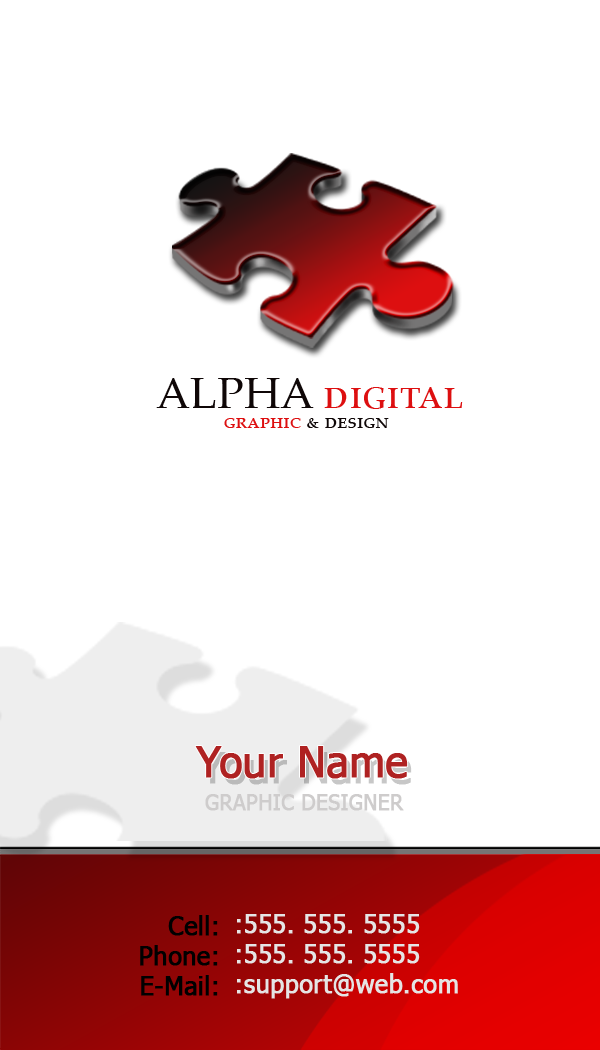
<style>
.page{position:relative;width:600px;height:1050px;background:#ffffff}
.page>*{position:absolute;margin:0}
.t1{font:44.2px "PalatinoLinotype-Roman";color:#dd0f10;font-variant:small-caps}
.t2{font:44.2px "PalatinoLinotype-Roman";color:#0f0707;font-variant:small-caps}
.t3{font:22.1px "PalatinoLinotype-Roman";color:#0f0707;font-variant:small-caps}
.t4{font:22.1px "PalatinoLinotype-Roman";color:#dd0f10;font-variant:small-caps}
.t5{font:41.7px "Tahoma";color:#af2222;font-weight:bold}
.t6{font:20.8px "Tahoma";color:#cecccc;font-weight:bold}
.t7{font:25px "Tahoma";color:#000000;font-weight:bold}
.t8{font:25px "Tahoma";color:#e5e5e5;font-weight:bold}
</style>
<div class="page">
<p class="t1" style="left:156px;top:378px;width:307px;height:31px"><span class="t2">ALPHA </span>digital</p>
<p class="t3" style="left:224px;top:418px;width:165px;height:10px"><span class="t4">graphic </span>&amp; design</p>
<p class="t5" style="left:195px;top:746px;width:213px;height:33px">Your Name</p>
<p class="t6" style="left:205px;top:794px;width:199px;height:17px">GRAPHIC DESIGNER</p>
<p class="t7" style="left:140px;top:915px;width:78px;height:81px;text-align:right">Cell:<br>Phone:<br>E-Mail:</p>
<p class="t8" style="left:237px;top:914px;width:221px;height:85px">:555. 555. 5555<br>:555. 555. 5555<br>:support@web.com</p>
</div>
